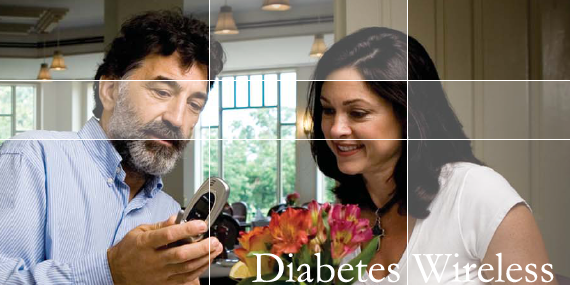
<style>
.page{position:relative;width:570px;height:285px}
.page>*{position:absolute;margin:0}
.t1{font:44px "Garamond";color:#ffffff}
</style>
<div class="page">
<p class="t1" style="left:252px;top:252px;width:302px;height:31px">Diabetes Wireless</p>
</div>
